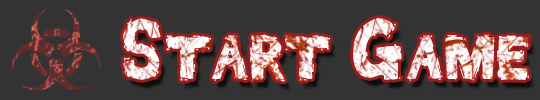
<style>
.page{position:relative;width:540px;height:100px;background:#333333}
.page>*{position:absolute;margin:0}
.t1{font:87.1px "DeadFontWalking"}
</style>
<div class="page">
<p class="t1" style="left:123px;top:18px;width:406px;height:64px">Start Game</p>
</div>
